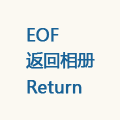
<style>
.page{position:relative;width:120px;height:120px;background:#fbf9f2}
.page>*{position:absolute;margin:0}
.t1{font:16.7px "MicrosoftYaHei";color:#186297;font-weight:bold}
</style>
<div class="page">
<p class="t1" style="left:27px;top:28px;width:32px;height:14px">EOF</p>
<p class="t1" style="left:26px;top:52px;width:69px;height:17px">返回相册</p>
<p class="t1" style="left:27px;top:80px;width:55px;height:14px">Return</p>
</div>
